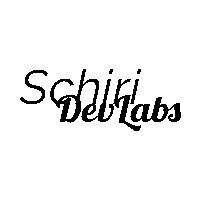
<style>
.page{position:relative;width:200px;height:200px;background:#ffffff}
.page>*{position:absolute;margin:0}
.t1{font:48px "Raleway-Italic";letter-spacing:0.01em;color:#000000}
.t2{font:36px "Lobster-Regular";letter-spacing:0.01em;color:#000000;scale:1.09 1}
</style>
<div class="page">
<p class="t1" style="left:20px;top:69px;width:121px;height:35px">Schiri</p>
<p class="t2" style="left:56px;top:95px;width:125px;height:36px">DevLabs</p>
</div>
